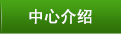
<style>
.page{position:relative;width:121px;height:34px}
.page>*{position:absolute;margin:0}
.t1{font:16px "SimHei";letter-spacing:0.02em;color:#ffffff}
</style>
<div class="page">
<p class="t1" style="left:29px;top:9px;width:63px;height:15px">中心介绍</p>
</div>
